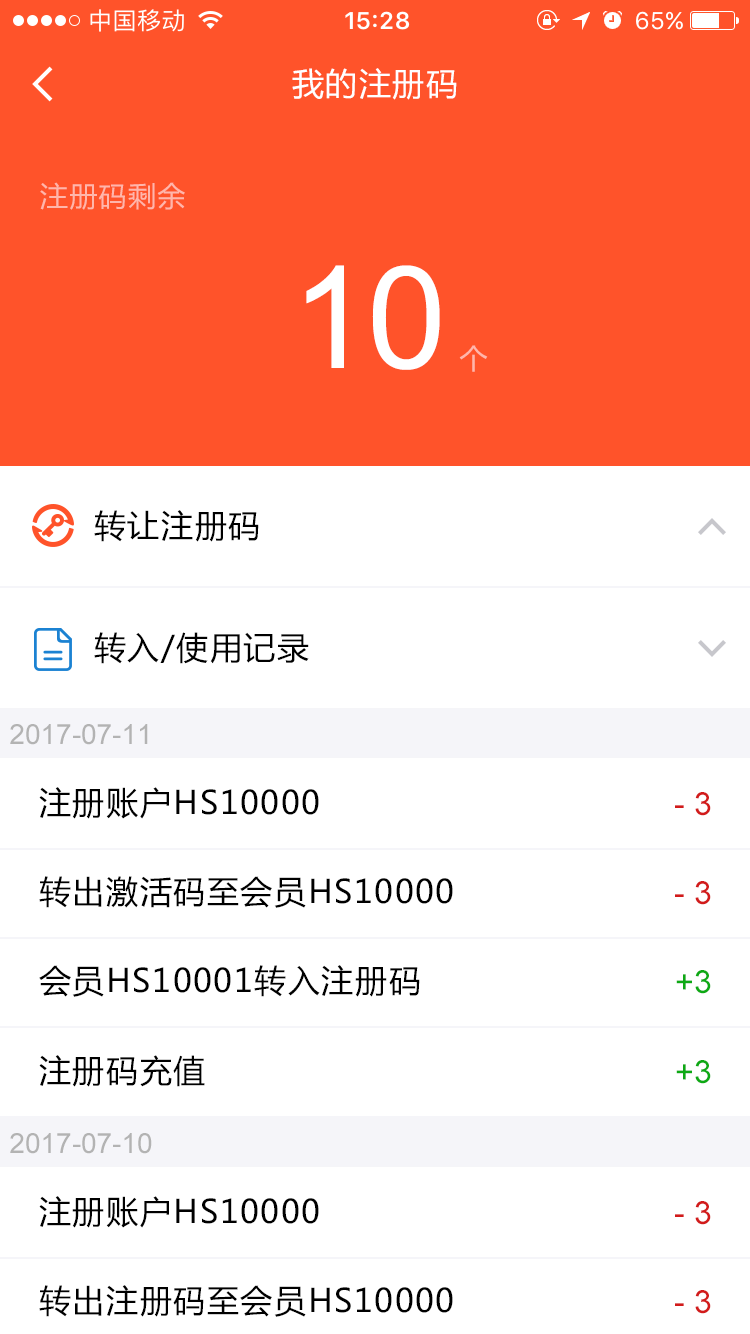
<style>
.page{position:relative;width:750px;height:1334px;background:#ffffff}
.page>*{position:absolute;margin:0}
.t1{font:32px "MicrosoftYaHei";letter-spacing:0.05em;color:#ffffff}
.t2{font:28px "MicrosoftYaHei";letter-spacing:0.05em;color:#ffb6ab}
.t3{font:142.5px "ArialMT";letter-spacing:-0.022em;color:#ffffff}
.t4{font:32px "MicrosoftYaHei";letter-spacing:0.05em;color:#000000}
.t5{font:28px "ArialMT";color:#b3b3b3}
.t6{font:32px "ArialMT";color:#d21b1b}
.t7{font:32px "ArialMT";color:#0da914}
</style>
<div class="page">
<p class="t1" style="left:292px;top:68px;width:165px;height:32px">我的注册码</p>
<p class="t2" style="left:40px;top:182px;width:145px;height:28px">注册码剩余</p>
<p class="t3" style="left:306px;top:265px;width:134px;height:105px">10</p>
<p class="t2" style="left:459px;top:345px;width:29px;height:27px">个</p>
<p class="t4" style="left:94px;top:510px;width:165px;height:32px">转让注册码</p>
<p class="t4" style="left:94px;top:632px;width:215px;height:32px">转入/使用记录</p>
<p class="t5" style="left:10px;top:724px;width:138px;height:21px">2017-07-11</p>
<p class="t4" style="left:39px;top:787px;width:280px;height:32px">注册账户HS10000</p>
<p class="t6" style="left:675px;top:792px;width:36px;height:24px">- 3</p>
<p class="t4" style="left:39px;top:876px;width:414px;height:32px">转出激活码至会员HS10000</p>
<p class="t6" style="left:675px;top:881px;width:36px;height:24px">- 3</p>
<p class="t4" style="left:39px;top:965px;width:381px;height:32px">会员HS10001转入注册码</p>
<p class="t7" style="left:676px;top:970px;width:35px;height:24px">+3</p>
<p class="t4" style="left:39px;top:1055px;width:166px;height:32px">注册码充值</p>
<p class="t7" style="left:676px;top:1060px;width:35px;height:24px">+3</p>
<p class="t5" style="left:10px;top:1133px;width:142px;height:21px">2017-07-10</p>
<p class="t4" style="left:39px;top:1196px;width:280px;height:32px">注册账户HS10000</p>
<p class="t6" style="left:675px;top:1201px;width:36px;height:24px">- 3</p>
<p class="t4" style="left:39px;top:1285px;width:414px;height:32px">转出注册码至会员HS10000</p>
<p class="t6" style="left:675px;top:1290px;width:36px;height:24px">- 3</p>
</div>
